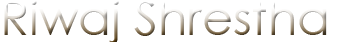
<style>
.page{position:relative;width:340px;height:42px;background:#ffffff}
.page>*{position:absolute;margin:0}
.t1{font:47.9px "CenturyGothic"}
</style>
<div class="page">
<p class="t1" style="left:4px;top:0px;width:323px;height:44px">Riwaj Shrestha</p>
</div>
